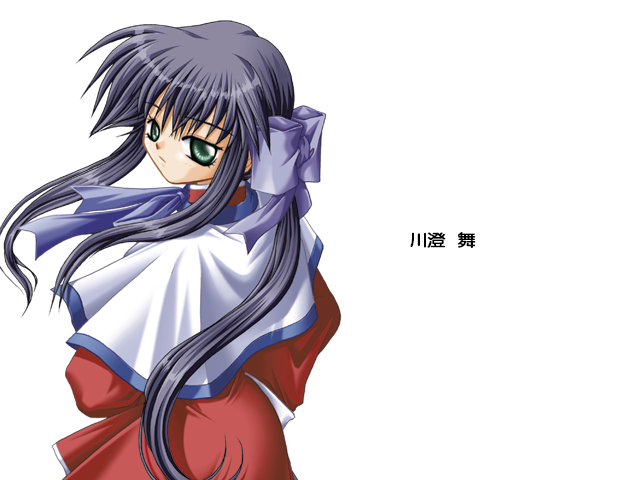
<style>
.page{position:relative;width:640px;height:480px;background:#ffffff}
.page>*{position:absolute;margin:0}
.t1{font:17px "FZY4K--GBK1-0";letter-spacing:-0.08em;color:#000000;scale:1.14 1}
</style>
<div class="page">
<p class="t1" style="left:410px;top:232px;width:66px;height:16px">川澄   舞</p>
</div>
